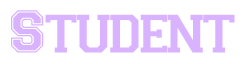
<style>
.page{position:relative;width:249px;height:64px;background:#ffffff}
.page>*{position:absolute;margin:0}
.t1{font:60px "Varsity-Regular";color:#d9b3ff}
</style>
<div class="page">
<p class="t1" style="left:11px;top:10px;width:224px;height:43px">Student</p>
</div>
